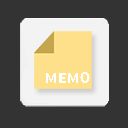
<style>
.page{position:relative;width:128px;height:128px;background:#333333}
.page>*{position:absolute;margin:0}
.t1{font:14px "NotoSansTC-Black";color:#ffffff}
</style>
<div class="page">
<p class="t1" style="left:46px;top:72px;width:44px;height:11px">MEMO</p>
</div>
